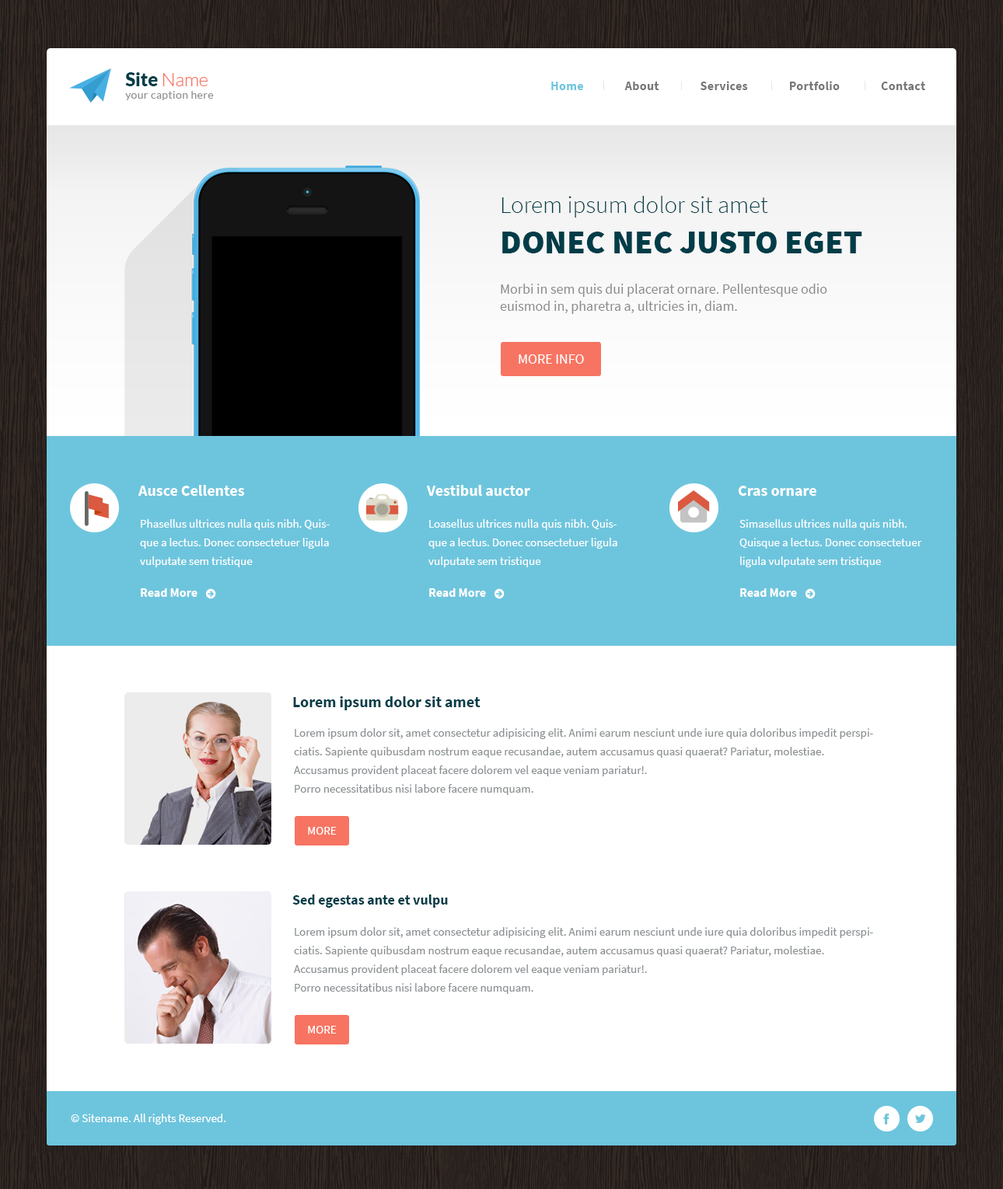
<style>
.page{position:relative;width:1003px;height:1189px;background:#ffffff}
.page>*{position:absolute;margin:0}
.t1{font:18.4px "Lato-Black";color:#003d48}
.t2{font:18.4px "Lato-Light";color:#f77462}
.t3{font:12.4px "SourceSansPro-Bold";letter-spacing:0.02em;color:#787878}
.t4{font:12.4px "SourceSansPro-Bold";letter-spacing:0.02em;color:#6dc5dd}
.t5{font:10.6px "Lato-Regular";letter-spacing:0.04em;color:#929292}
.t6{font:24.1px "SourceSansPro-Light";color:#003d48}
.t7{font:33.4px "SourceSansPro-Black";color:#003d48;text-transform:uppercase}
.t8{font:14px "SourceSansPro-Regular";color:#8b8b8b}
.t9{font:14px "SourceSansPro-Regular";color:#ffffff;text-transform:uppercase}
.t10{font:15.5px "SourceSansPro-Bold";color:#ffffff}
.t11{font:11.7px/18.7px "SourceSansPro-Regular";color:#ffffff}
.t12{font:12.4px "SourceSansPro-Bold";color:#ffffff}
.t13{font:15.5px "SourceSansPro-Bold";color:#003d48}
.t14{font:11.7px/18.7px "SourceSansPro-Regular";color:#8c9193}
.t15{font:11.7px "SourceSansPro-Regular";color:#ffffff;text-transform:uppercase}
.t16{font:14px "SourceSansPro-Bold";color:#003d48}
.t17{font:11.7px "SourceSansPro-Regular";color:#ffffff}
</style>
<div class="page">
<p class="t1" style="left:125px;top:72px;width:83px;height:14px">Site <span class="t2">Name</span></p>
<p class="t3" style="left:551px;top:81px;width:374px;height:9px"><span class="t4">Home</span>               About               Services               Portfolio               Contact</p>
<p class="t5" style="left:125px;top:91px;width:89px;height:9px">your caption here</p>
<p class="t6" style="left:501px;top:196px;width:361px;height:57px">Lorem ipsum dolor sit amet<br><span class="t7">Donec nec justo eget</span></p>
<p class="t8" style="left:500px;top:284px;width:327px;height:30px">Morbi in sem quis dui placerat ornare. Pellentesque odio<br>euismod in, pharetra a, ultricies in, diam.</p>
<p class="t9" style="left:518px;top:354px;width:66px;height:10px">More INfo</p>
<p class="t10" style="left:138px;top:485px;width:106px;height:11px">Ausce Cellentes</p>
<p class="t10" style="left:426px;top:485px;width:104px;height:11px">Vestibul auctor</p>
<p class="t10" style="left:738px;top:486px;width:78px;height:10px">Cras ornare</p>
<p class="t11" style="left:140px;top:519px;width:190px;height:48px">Phasellus ultrices nulla quis nibh. Quisque a lectus. Donec consectetuer ligula vulputate sem tristique</p>
<p class="t11" style="left:428px;top:519px;width:189px;height:48px">Loasellus ultrices nulla quis nibh. Quisque a lectus. Donec consectetuer ligula vulputate sem tristique</p>
<p class="t11" style="left:739px;top:519px;width:183px;height:48px">Simasellus ultrices nulla quis nibh. Quisque a lectus. Donec consectetuer ligula vulputate sem tristique</p>
<p class="t12" style="left:141px;top:588px;width:56px;height:9px">Read More</p>
<p class="t12" style="left:429px;top:588px;width:57px;height:9px">Read More</p>
<p class="t12" style="left:740px;top:588px;width:57px;height:9px">Read More</p>
<p class="t13" style="left:293px;top:696px;width:187px;height:14px">Lorem ipsum dolor sit amet</p>
<p class="t14" style="left:293px;top:728px;width:580px;height:67px">Lorem ipsum dolor sit, amet consectetur adipisicing elit. Animi earum nesciunt unde iure quia doloribus impedit perspiciatis. Sapiente quibusdam nostrum eaque recusandae, autem accusamus quasi quaerat? Pariatur, molestiae. Accusamus provident placeat facere dolorem vel eaque veniam pariatur!.<br>Porro necessitatibus nisi labore facere numquam.</p>
<p class="t15" style="left:308px;top:827px;width:28px;height:8px">More</p>
<p class="t16" style="left:292px;top:895px;width:156px;height:13px">Sed egestas ante et vulpu</p>
<p class="t14" style="left:293px;top:927px;width:580px;height:67px">Lorem ipsum dolor sit, amet consectetur adipisicing elit. Animi earum nesciunt unde iure quia doloribus impedit perspiciatis. Sapiente quibusdam nostrum eaque recusandae, autem accusamus quasi quaerat? Pariatur, molestiae. Accusamus provident placeat facere dolorem vel eaque veniam pariatur!.<br>Porro necessitatibus nisi labore facere numquam.</p>
<p class="t15" style="left:308px;top:1026px;width:28px;height:8px">More</p>
<p class="t17" style="left:71px;top:1114px;width:155px;height:11px">© Sitename. All rights Reserved.</p>
</div>
